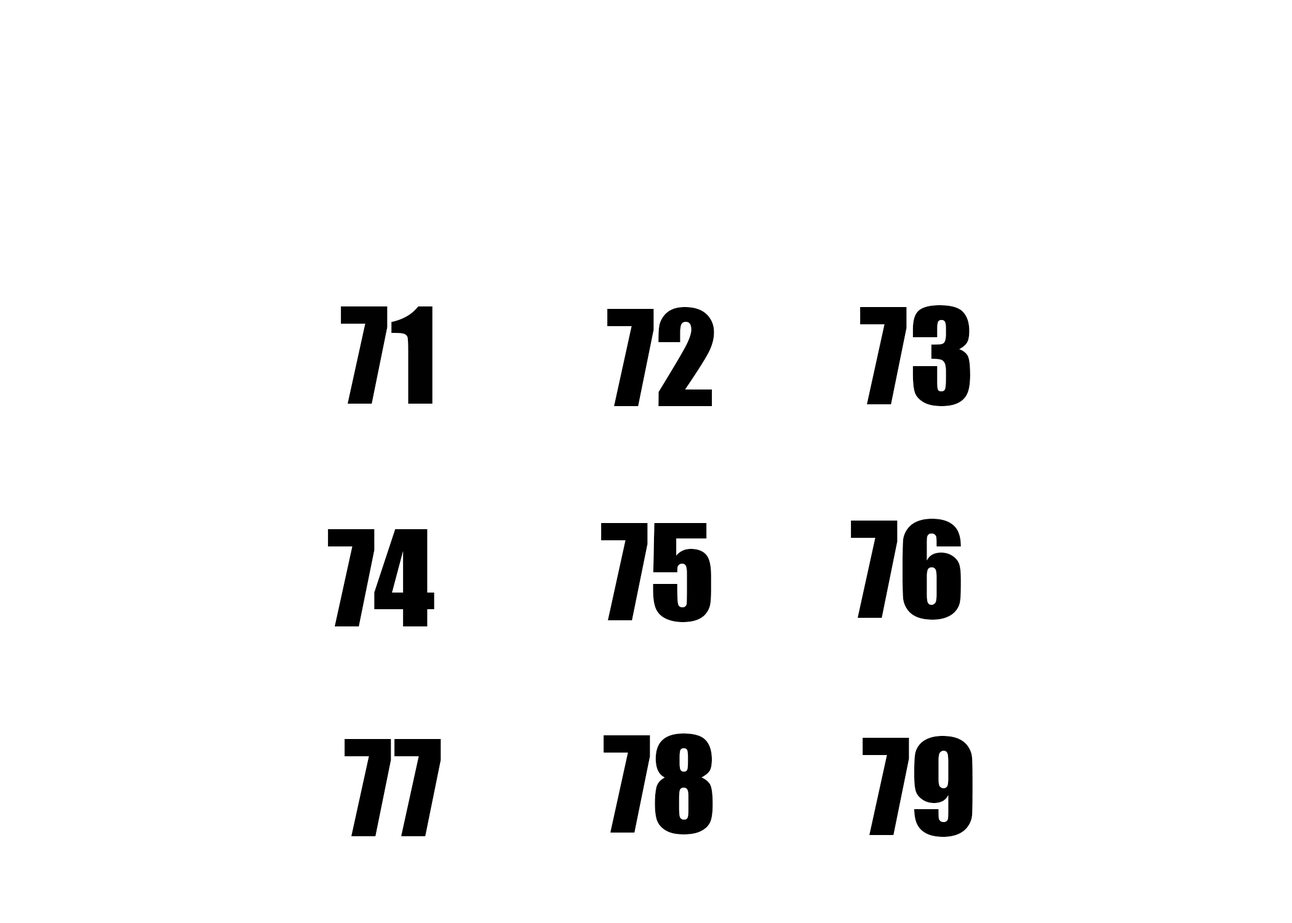
<style>
.page{position:relative;width:1292px;height:923px;background:#ffffff}
.page>*{position:absolute;margin:0}
.t1{font:123.1px "Impact";color:#000000}
.t2{font:123.1px "Impact";color:#010101}
</style>
<div class="page">
<p class="t1" style="left:860px;top:305px;width:110px;height:101px">73</p>
<p class="t2" style="left:341px;top:306px;width:92px;height:98px">71</p>
<p class="t1" style="left:607px;top:307px;width:107px;height:99px">72</p>
<p class="t1" style="left:851px;top:519px;width:110px;height:101px">76</p>
<p class="t1" style="left:328px;top:529px;width:106px;height:97px">74</p>
<p class="t1" style="left:601px;top:523px;width:110px;height:99px">75</p>
<p class="t1" style="left:604px;top:733px;width:109px;height:101px">78</p>
<p class="t1" style="left:863px;top:736px;width:110px;height:101px">79</p>
<p class="t1" style="left:345px;top:739px;width:96px;height:97px">77</p>
</div>
